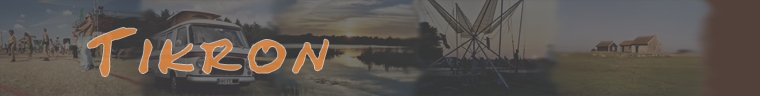
<style>
.page{position:relative;width:760px;height:96px}
.page>*{position:absolute;margin:0}
.t1{font:48px "CrackedJohnnie";letter-spacing:0.2em;color:#cf8040;font-variant:small-caps}
</style>
<div class="page">
<p class="t1" style="left:88px;top:28px;width:241px;height:48px">Tikron</p>
</div>
